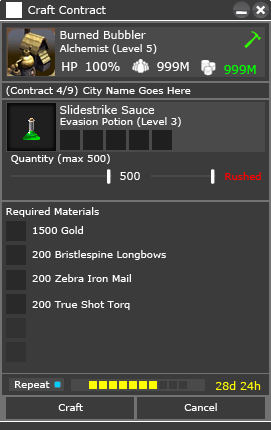
<style>
.page{position:relative;width:271px;height:430px;background:#3b3b3b}
.page>*{position:absolute;margin:0}
.t1{font:11px "Verdana";color:#ffffff}
.t2{font:10px "Verdana";color:#ffffff}
.t3{font:12px "Verdana";color:#ffffff}
.t4{font:12px "Verdana";color:#00ff00}
.t5{font:10px "Verdana";color:#ff0000}
.t6{font:11px "Verdana";color:#ffff00}
</style>
<div class="page">
<p class="t1" style="left:28px;top:5px;width:78px;height:9px">Craft Contract</p>
<p class="t1" style="left:60px;top:30px;width:86px;height:9px">Burned Bubbler</p>
<p class="t2" style="left:59px;top:44px;width:98px;height:10px">Alchemist (Level 5)</p>
<p class="t3" style="left:62px;top:62px;width:16px;height:9px">HP</p>
<p class="t3" style="left:86px;top:62px;width:34px;height:9px">100%</p>
<p class="t3" style="left:157px;top:62px;width:32px;height:9px">999M</p>
<p class="t4" style="left:224px;top:65px;width:32px;height:9px">999M</p>
<p class="t2" style="left:6px;top:86px;width:72px;height:10px">(Contract 4/9)</p>
<p class="t2" style="left:83px;top:87px;width:108px;height:9px">City Name Goes Here</p>
<p class="t1" style="left:60px;top:105px;width:95px;height:9px">Slidestrike Sauce</p>
<p class="t2" style="left:60px;top:117px;width:121px;height:10px">Evasion Potion (Level 3)</p>
<p class="t2" style="left:11px;top:154px;width:99px;height:10px">Quantity (max 500)</p>
<p class="t1" style="left:120px;top:172px;width:20px;height:8px">500</p>
<p class="t5" style="left:225px;top:172px;width:36px;height:8px">Rushed</p>
<p class="t2" style="left:6px;top:207px;width:93px;height:10px">Required Materials</p>
<p class="t2" style="left:33px;top:226px;width:50px;height:8px">1500 Gold</p>
<p class="t2" style="left:32px;top:250px;width:134px;height:10px">200 Bristlespine Longbows</p>
<p class="t2" style="left:32px;top:274px;width:99px;height:8px">200 Zebra Iron Mail</p>
<p class="t2" style="left:32px;top:300px;width:98px;height:10px">200 True Shot Torq</p>
<p class="t2" style="left:15px;top:381px;width:35px;height:9px">Repeat</p>
<p class="t6" style="left:216px;top:381px;width:45px;height:9px">28d 24h</p>
<p class="t2" style="left:58px;top:403px;width:25px;height:8px">Craft</p>
<p class="t2" style="left:184px;top:403px;width:33px;height:8px">Cancel</p>
</div>
